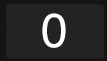
<style>
.page{position:relative;width:107px;height:61px;background:#232323}
.page>*{position:absolute;margin:0}
.t1{font:48px "Helvetica";color:#ffffff}
</style>
<div class="page">
<p class="t1" style="left:42px;top:13px;width:24px;height:35px">0</p>
</div>
